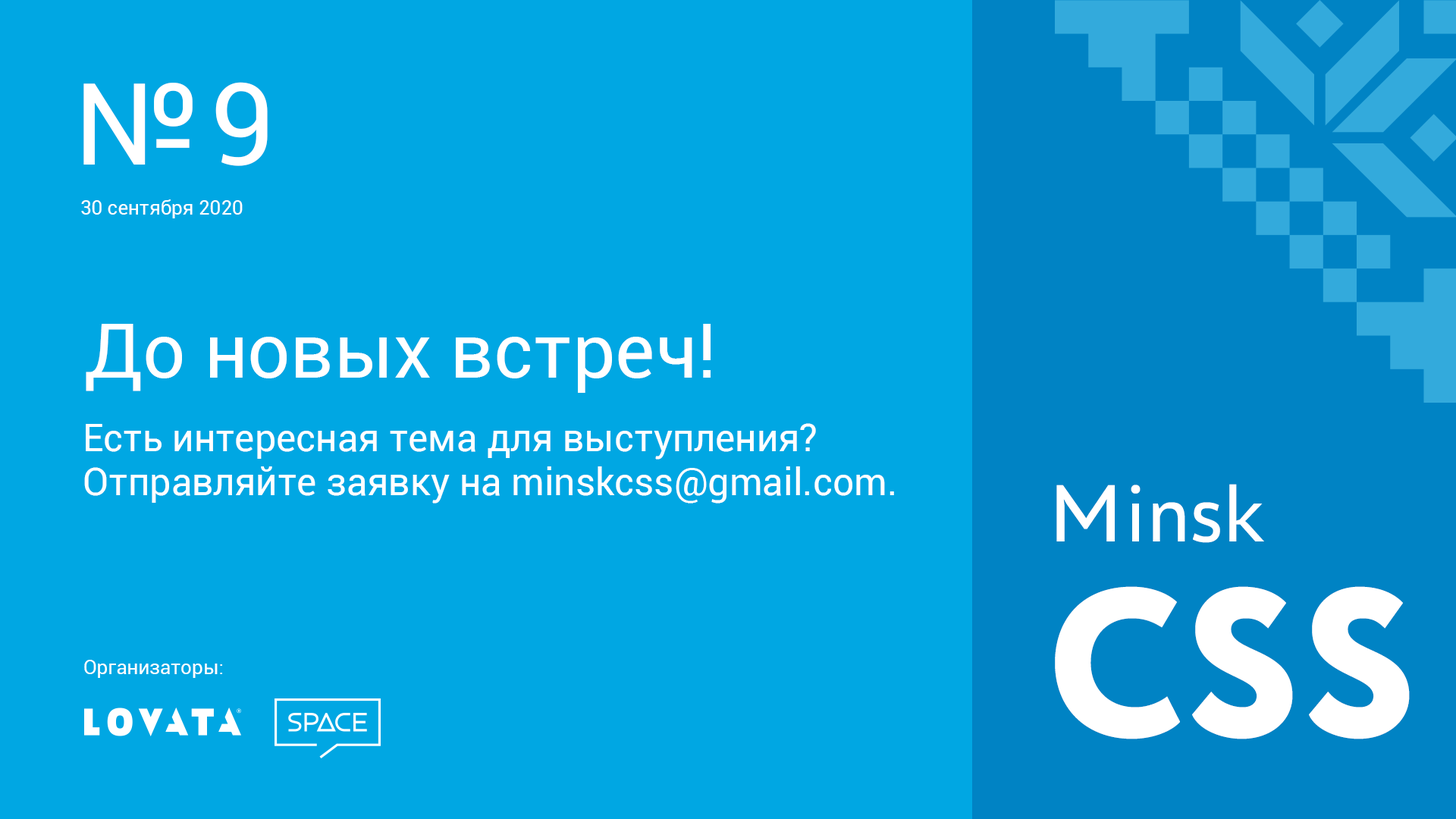
<style>
.page{position:relative;width:1456px;height:819px;background:#00a7e3}
.page>*{position:absolute;margin:0}
.t1{font:113.7px "Roboto-Regular";color:#ffffff}
.t2{font:19.7px "Roboto-Regular";color:#ffffff}
.t3{font:75.8px "Roboto-Regular";color:#ffffff}
.t4{font:37.9px/44px "Roboto-Regular";color:#ffffff}
.t5{font:84.9px "PTAstraSans-Regular";color:#ffffff}
.t6{font:210.1px "Circe-ExtraBold";color:#ffffff}
</style>
<div class="page">
<p class="t1" style="left:83px;top:82px;width:185px;height:84px">№ 9</p>
<p class="t2" style="left:81px;top:199px;width:162px;height:19px">30 сентября 2020</p>
<p class="t3" style="left:86px;top:324px;width:625px;height:69px">До новых встреч!</p>
<p class="t4" style="left:84px;top:423px;width:810px;height:81px">Есть интересная тема для выступления?<br>Отправляйте заявку на minskcss@gmail.com.</p>
<p class="t5" style="left:1056px;top:484px;width:208px;height:59px">Minsk</p>
<p class="t6" style="left:1055px;top:586px;width:355px;height:153px">CSS</p>
<p class="t2" style="left:84px;top:660px;width:138px;height:18px">Организаторы:</p>
</div>
